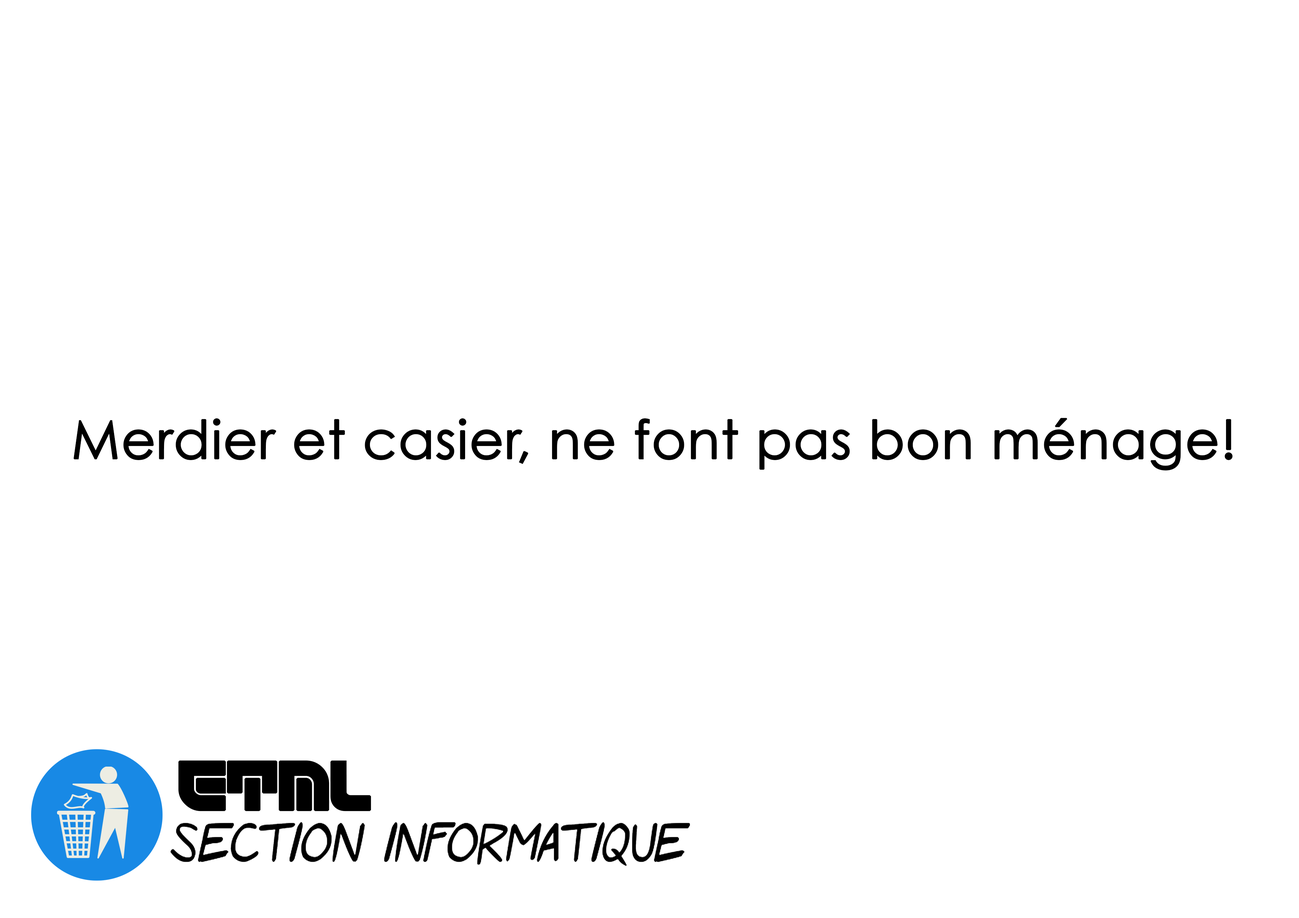
<style>
.page{position:relative;width:1299px;height:918px;background:#ffffff}
.page>*{position:absolute;margin:0}
.t1{font:52.6px "CenturyGothic";color:#000000;font-weight:bold}
.t2{font:49.6px "ETML-Regular";color:#000000;font-weight:bold}
</style>
<div class="page">
<p class="t1" style="left:73px;top:418px;width:1159px;height:53px">Merdier et casier, ne font pas bon ménage!</p>
<p class="t2" style="left:178px;top:760px;width:193px;height:52px">ETML</p>
</div>
